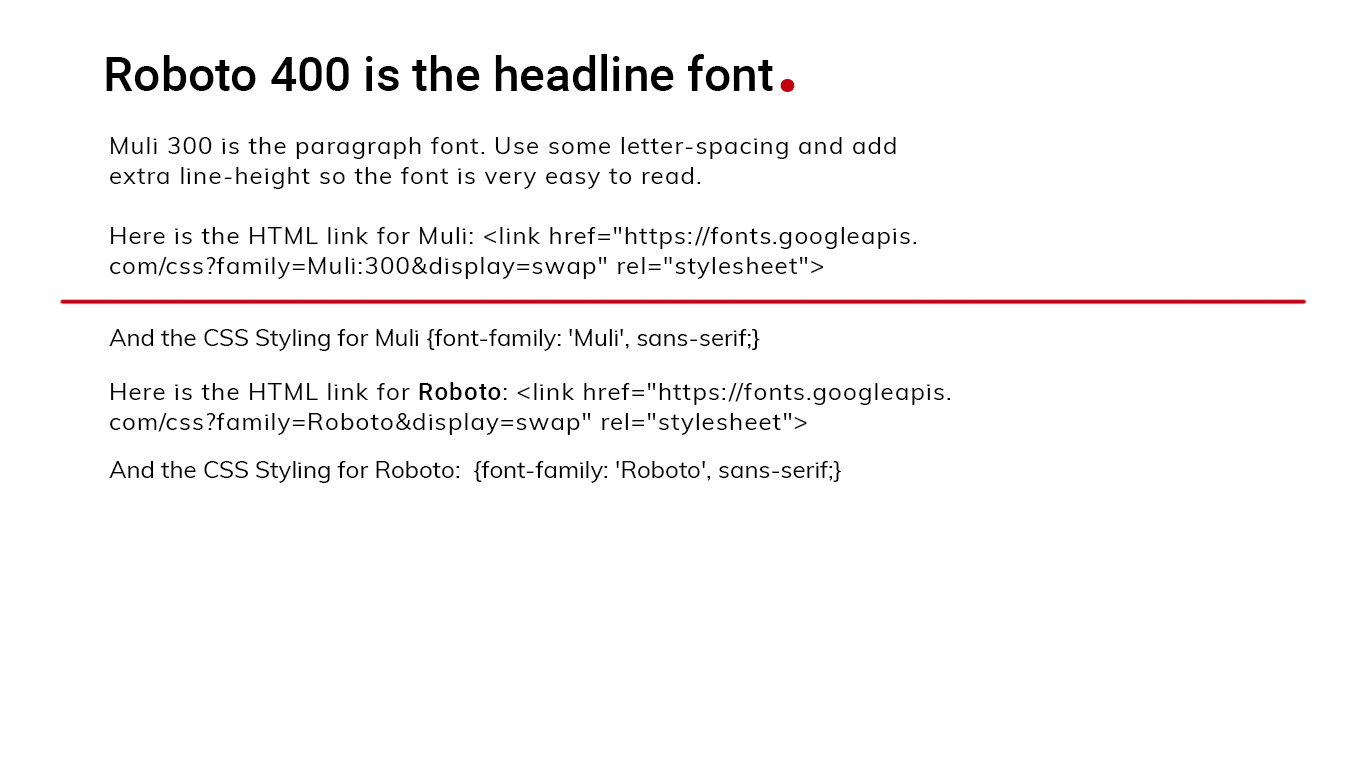
<style>
.page{position:relative;width:1364px;height:763px;background:#ffffff}
.page>*{position:absolute;margin:0}
.t1{font:48px "Roboto-Medium";color:#000000}
.t2{font:100px "Roboto-Medium";color:#bf0313}
.t3{font:24px/30px "Muli-Regular";letter-spacing:0.05em;color:#000000}
.t4{font:24px/24px "Muli-Regular";color:#000000}
.t5{font:24px/30px "Roboto-Medium";letter-spacing:0.05em;color:#000000}
</style>
<div class="page">
<p class="t1" style="left:106px;top:54px;width:689px;height:38px">Roboto 400 is the headline font<span class="t2">.</span></p>
<p class="t3" style="left:109px;top:137px;width:842px;height:346px">Muli 300 is the paragraph font. Use some letter-spacing and add<br>extra line-height so the font is very easy to read.<br><br>Here is the HTML link for Muli: &lt;link href="https://fonts.googleapis.<br>com/css?family=Muli:300&amp;display=swap" rel="stylesheet"&gt; <br><br><span class="t4"><br>And the CSS Styling for Muli {font-family: 'Muli', sans-serif;}<br> <br></span>Here is the HTML link for <span class="t5">Roboto</span>: &lt;link href="https://fonts.googleapis.<br>com/css?family=Roboto&amp;display=swap" rel="stylesheet"&gt;<br><span class="t4"><br>And the CSS Styling for Roboto:  {font-family: 'Roboto', sans-serif;}</span></p>
</div>
